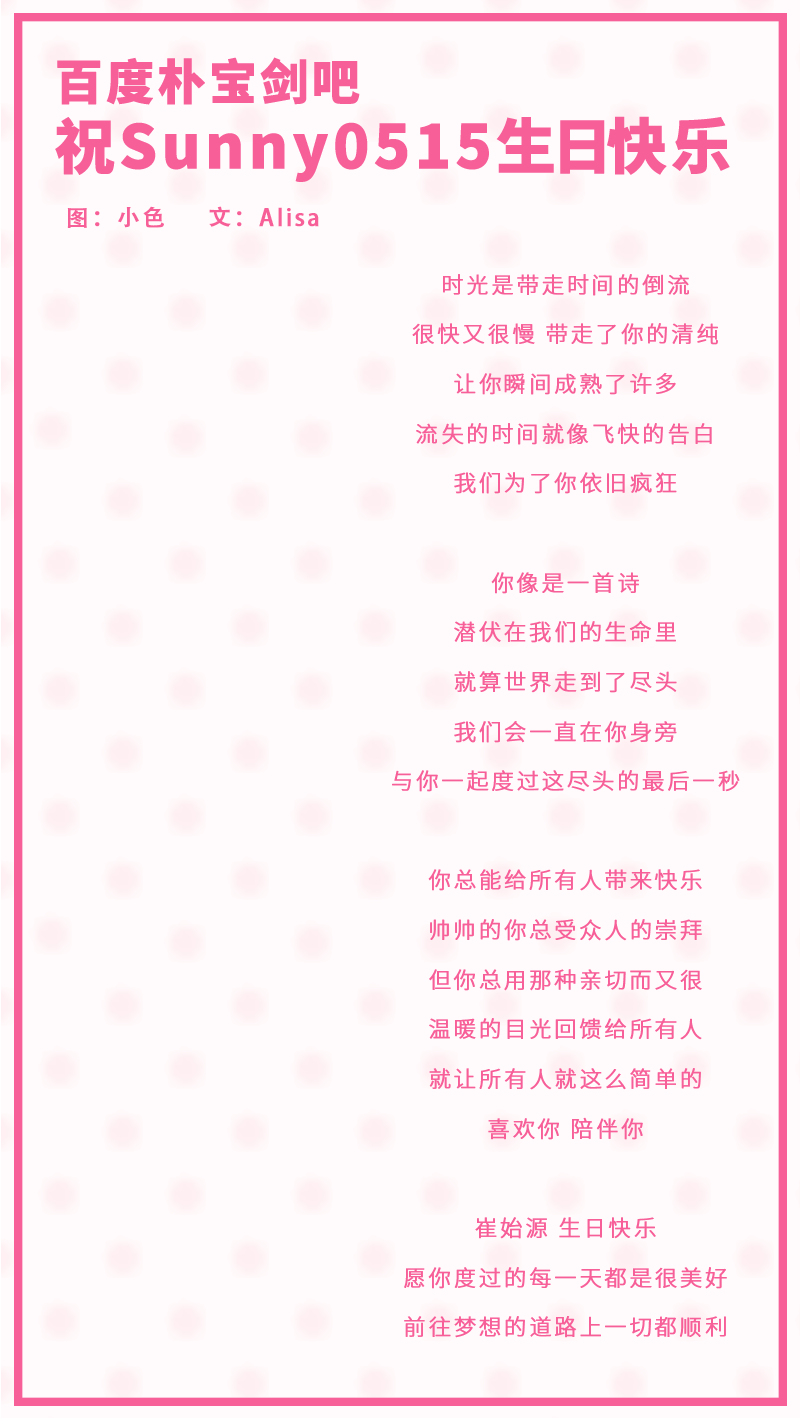
<style>
.page{position:relative;width:800px;height:1418px;background:#fffafb}
.page>*{position:absolute;margin:0}
.t1{font:60px/58.3px "SourceHanSansCN-Heavy";letter-spacing:0.044em;color:#f75f99;font-weight:bold}
.t2{font:48px/58.3px "SourceHanSansCN-Heavy";letter-spacing:0.044em;color:#f75f99;font-weight:bold}
.t3{font:60px/58.3px "SourceHanSansCN-Heavy";letter-spacing:-0.096em;color:#f75f99;font-weight:bold}
.t4{font:60px/58.3px "SourceHanSansCN-Heavy";letter-spacing:-0.116em;color:#f75f99;font-weight:bold}
.t5{font:22.6px "AdobeHeitiStd-Regular";letter-spacing:0.104em;color:#f75f99;font-weight:bold}
.t6{font:22.2px/49.6px "SourceHanSansCN-Light";letter-spacing:0.104em;color:#f75f99;font-weight:bold}
</style>
<div class="page">
<p class="t1" style="left:55px;top:57px;width:675px;height:125px"><span class="t2">百度朴宝剑吧<br></span>祝Sunny0515<span class="t3">生</span><span class="t4">日</span>快乐</p>
<p class="t5" style="left:67px;top:206px;width:252px;height:22px">图：小色     文：Alisa</p>
<p class="t6" style="left:392px;top:274px;width:348px;height:1064px;text-align:center">时光是带走时间的倒流<br>很快又很慢 带走了你的清纯<br>让你瞬间成熟了许多<br>流失的时间就像飞快的告白<br>我们为了你依旧疯狂<br><br>你像是一首诗<br>潜伏在我们的生命里<br>就算世界走到了尽头<br>我们会一直在你身旁<br>与你一起度过这尽头的最后一秒<br><br>你总能给所有人带来快乐<br>帅帅的你总受众人的崇拜<br>但你总用那种亲切而又很<br>温暖的目光回馈给所有人<br>就让所有人就这么简单的<br>喜欢你 陪伴你<br><br>崔始源 生日快乐<br>愿你度过的每一天都是很美好<br>前往梦想的道路上一切都顺利</p>
</div>
